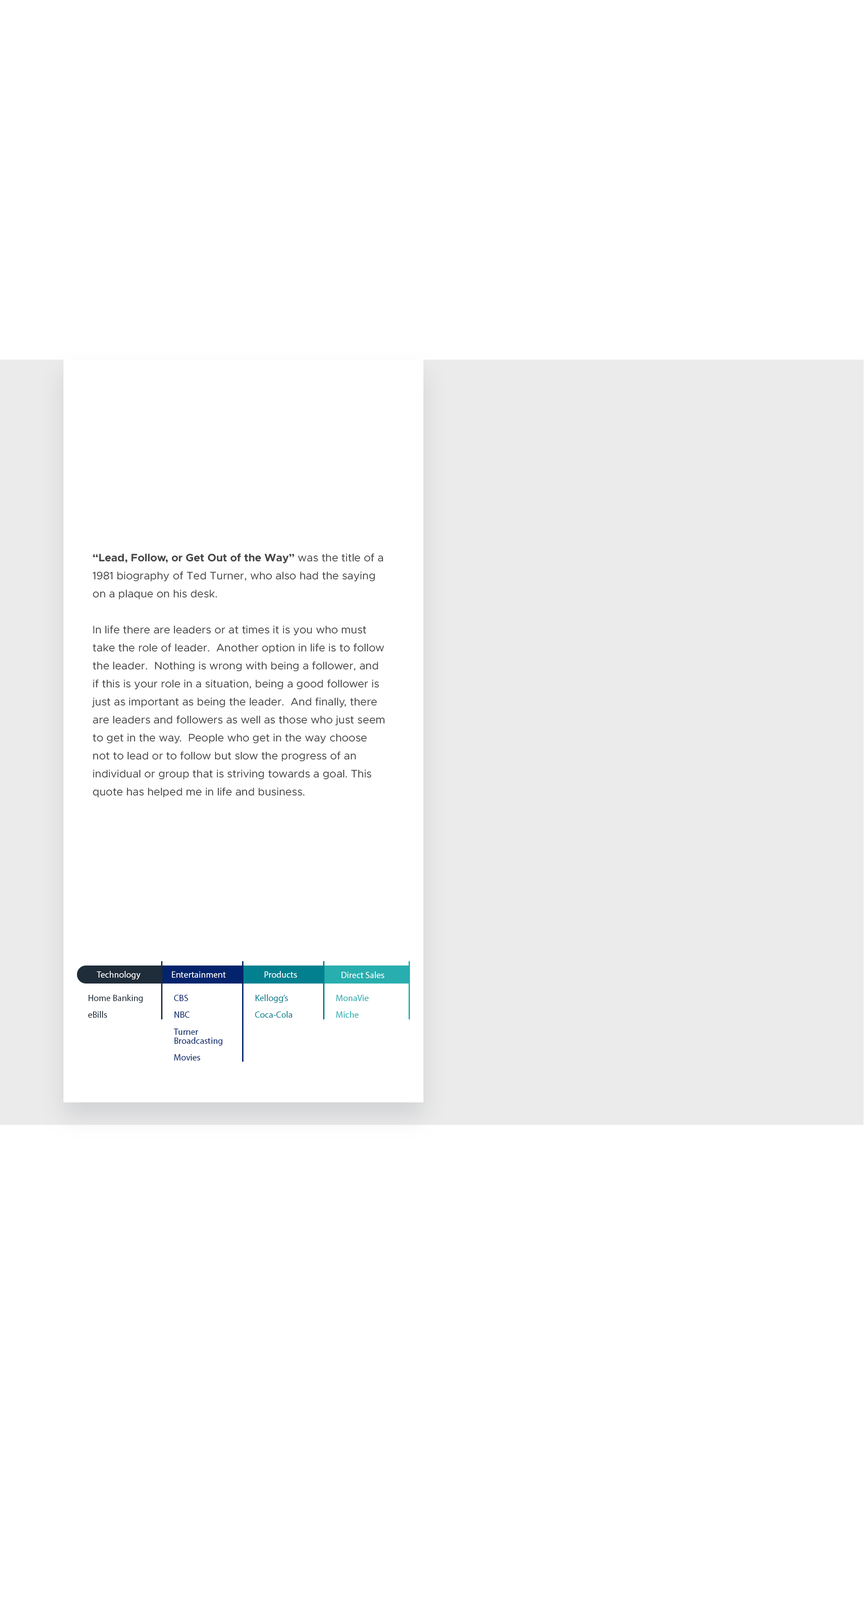
<style>
.page{position:relative;width:864px;height:1620px;background:#ffffff}
.page>*{position:absolute;margin:0}
.t1{font:10.8px/18px "Metropolis-Regular";color:#464646}
.t2{font:10.8px/18px "Metropolis-Bold";color:#464646}
.t3{font:9px "MyriadPro-Regular";color:#ffffff}
.t4{font:9px/16.9px "MyriadPro-Regular";color:#1f2c39}
.t5{font:9px/16.9px "MyriadPro-Regular";color:#03246c}
.t6{font:9px/9px "MyriadPro-Regular";color:#03246c}
.t7{font:9px/16.9px "MyriadPro-Regular";color:#028090}
.t8{font:9px/16.9px "MyriadPro-Regular";color:#28aeaf}
</style>
<div class="page">
<p class="t1" style="left:92px;top:553px;width:293px;height:244px"><span class="t2">“Lead, Follow, or Get Out of the Way” </span>was the title of a 1981 biography of Ted Turner, who also had the saying on a plaque on his desk.<br> <br>In life there are leaders or at times it is you who must take the role of leader.  Another option in life is to follow the leader.  Nothing is wrong with being a follower, and if this is your role in a situation, being a good follower is just as important as being the leader.  And finally, there are leaders and followers as well as those who just seem to get in the way.  People who get in the way choose not to lead or to follow but slow the progress of an individual or group that is striving towards a goal. This quote has helped me in life and business.</p>
<p class="t3" style="left:97px;top:971px;width:43px;height:8px">Technology</p>
<p class="t3" style="left:172px;top:971px;width:54px;height:6px">Entertainment</p>
<p class="t3" style="left:265px;top:971px;width:32px;height:6px">Products</p>
<p class="t3" style="left:342px;top:971px;width:42px;height:7px">Direct Sales</p>
<p class="t4" style="left:88px;top:994px;width:55px;height:23px">Home Banking<br>eBills</p>
<p class="t5" style="left:174px;top:994px;width:48px;height:66px">CBS<br>NBC<br>Turner <br><span class="t6">Broadcasting<br></span>Movies</p>
<p class="t7" style="left:255px;top:994px;width:37px;height:23px">Kellogg’s<br>Coca-Cola</p>
<p class="t8" style="left:336px;top:994px;width:33px;height:23px">MonaVie<br>Miche</p>
</div>
